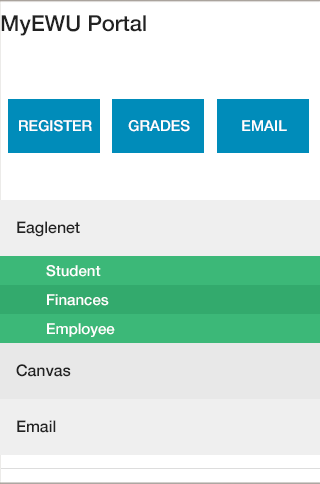
<style>
.page{position:relative;width:320px;height:484px;background:#ffffff}
.page>*{position:absolute;margin:0}
.t1{font:22px "HelveticaNeue-Medium";color:#222222}
.t2{font:15px "HelveticaNeue-Medium";color:#ffffff}
.t3{font:16px "HelveticaNeue-Medium";color:#222222}
</style>
<div class="page">
<p class="t1" style="left:1px;top:15px;width:145px;height:21px">MyEWU Portal</p>
<p class="t2" style="left:19px;top:120px;width:73px;height:12px">REGISTER</p>
<p class="t2" style="left:128px;top:120px;width:62px;height:12px">GRADES</p>
<p class="t2" style="left:242px;top:120px;width:45px;height:11px">EMAIL</p>
<p class="t3" style="left:17px;top:221px;width:63px;height:16px">Eaglenet</p>
<p class="t2" style="left:46px;top:265px;width:55px;height:12px">Student</p>
<p class="t2" style="left:47px;top:294px;width:62px;height:12px">Finances</p>
<p class="t2" style="left:47px;top:323px;width:68px;height:14px">Employee</p>
<p class="t3" style="left:16px;top:364px;width:55px;height:13px">Canvas</p>
<p class="t3" style="left:17px;top:420px;width:39px;height:13px">Email</p>
</div>
